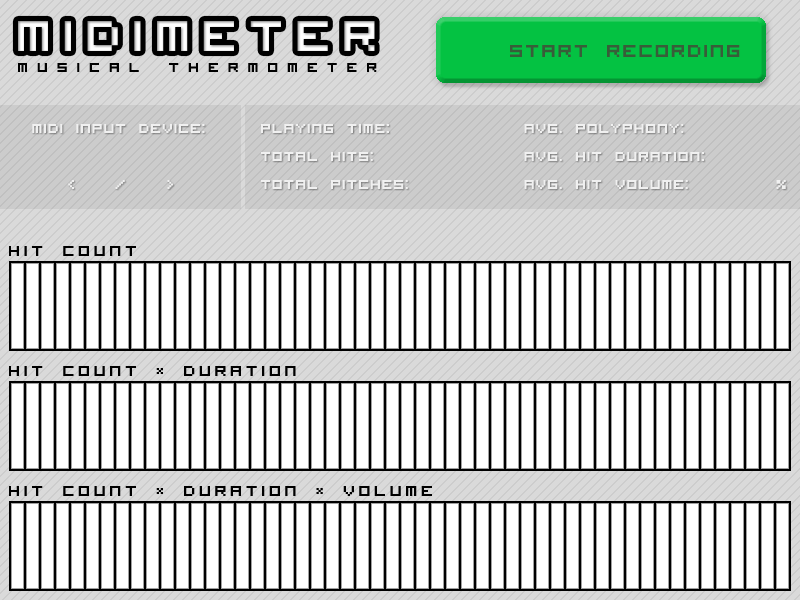
<style>
.page{position:relative;width:800px;height:600px;background:#ffffff}
.page>*{position:absolute;margin:0}
.t1{font:60px "VisitorTT1BRK";letter-spacing:0.18em;color:#fefefe}
.t2{font:24px "VisitorTT1BRK";letter-spacing:0.075em;color:#385d39}
.t3{font:18px "VisitorTT1BRK";letter-spacing:0.5em;color:#000000}
.t4{font:18px/28px "VisitorTT1BRK";letter-spacing:0.05em;color:#f0f0f0}
</style>
<div class="page">
<p class="t1" style="left:18px;top:21px;width:357px;height:30px">midimeter</p>
<p class="t2" style="left:510px;top:45px;width:230px;height:12px">start recording</p>
<p class="t3" style="left:18px;top:63px;width:359px;height:9px">musical thermometer</p>
<p class="t4" style="left:32px;top:124px;width:754px;height:65px">midi input device:  playing time:     avg. polyphony:<br>       total hits:     avg. hit duration:<br>   &lt;   /  &gt;   total pitches:    avg. hit volume:    %</p>
</div>
